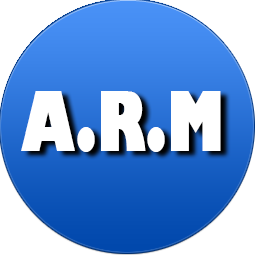
<style>
.page{position:relative;width:256px;height:256px;background:#ffffff}
.page>*{position:absolute;margin:0}
.t1{font:80px "GillSans-UltraBoldCondensed";color:#ffffff}
</style>
<div class="page">
<p class="t1" style="left:21px;top:91px;width:200px;height:61px">A.R.M</p>
</div>
